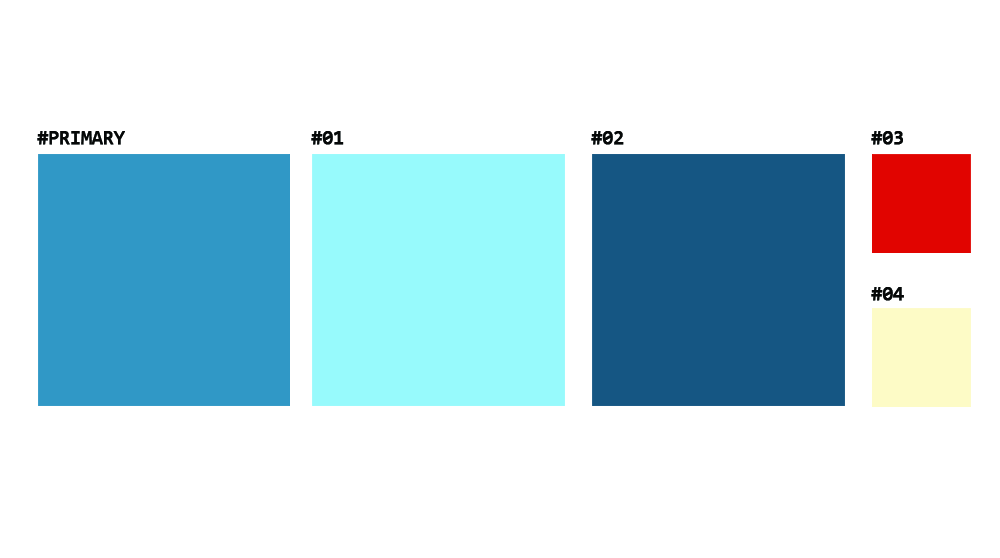
<style>
.page{position:relative;width:1000px;height:558px;background:#ffffff}
.page>*{position:absolute;margin:0}
.t1{font:20px "Consolas";letter-spacing:-0.03em;color:#060808;text-transform:uppercase;font-weight:bold}
</style>
<div class="page">
<p class="t1" style="left:37px;top:131px;width:88px;height:14px">#primary</p>
<p class="t1" style="left:311px;top:131px;width:33px;height:14px">#01</p>
<p class="t1" style="left:591px;top:131px;width:33px;height:14px">#02</p>
<p class="t1" style="left:871px;top:131px;width:32px;height:14px">#03</p>
<p class="t1" style="left:871px;top:287px;width:33px;height:14px">#04</p>
</div>
